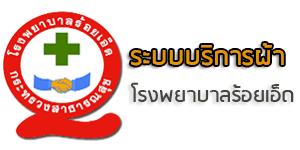
<style>
.page{position:relative;width:300px;height:150px;background:#ffffff}
.page>*{position:absolute;margin:0}
.t1{font:30px "RSU-Bold";color:#e59406}
.t2{font:24px "RSU-Bold";color:#484540}
</style>
<div class="page">
<p class="t1" style="left:131px;top:43px;width:153px;height:23px">ระบบบริการผ้้า</p>
<p class="t2" style="left:131px;top:82px;width:163px;height:20px">โรงพยาบาลร้อยเอ็ด</p>
</div>
